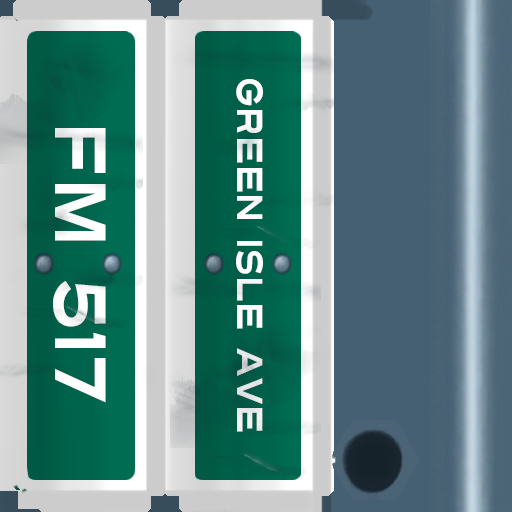
<style>
.page{position:relative;width:512px;height:512px}
.page>*{position:absolute;margin:0}
.t1{font:36px "Turnpike";color:#fefeff;scale:0.75 1}
.t2{font:72px "Turnpike";color:#fefeff;scale:0.75 1}
</style>
<div class="page">
<p class="t1" style="left:236px;top:79px;width:27px;height:353px;rotate:90deg">Green isle Ave</p>
<p class="t2" style="left:53px;top:128px;width:53px;height:275px;rotate:90deg">fm 517</p>
</div>
